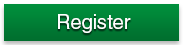
<style>
.page{position:relative;width:183px;height:45px}
.page>*{position:absolute;margin:0}
.t1{font:20px "Helvetica";color:#ffffff}
</style>
<div class="page">
<p class="t1" style="left:58px;top:14px;width:73px;height:19px">Register</p>
</div>
